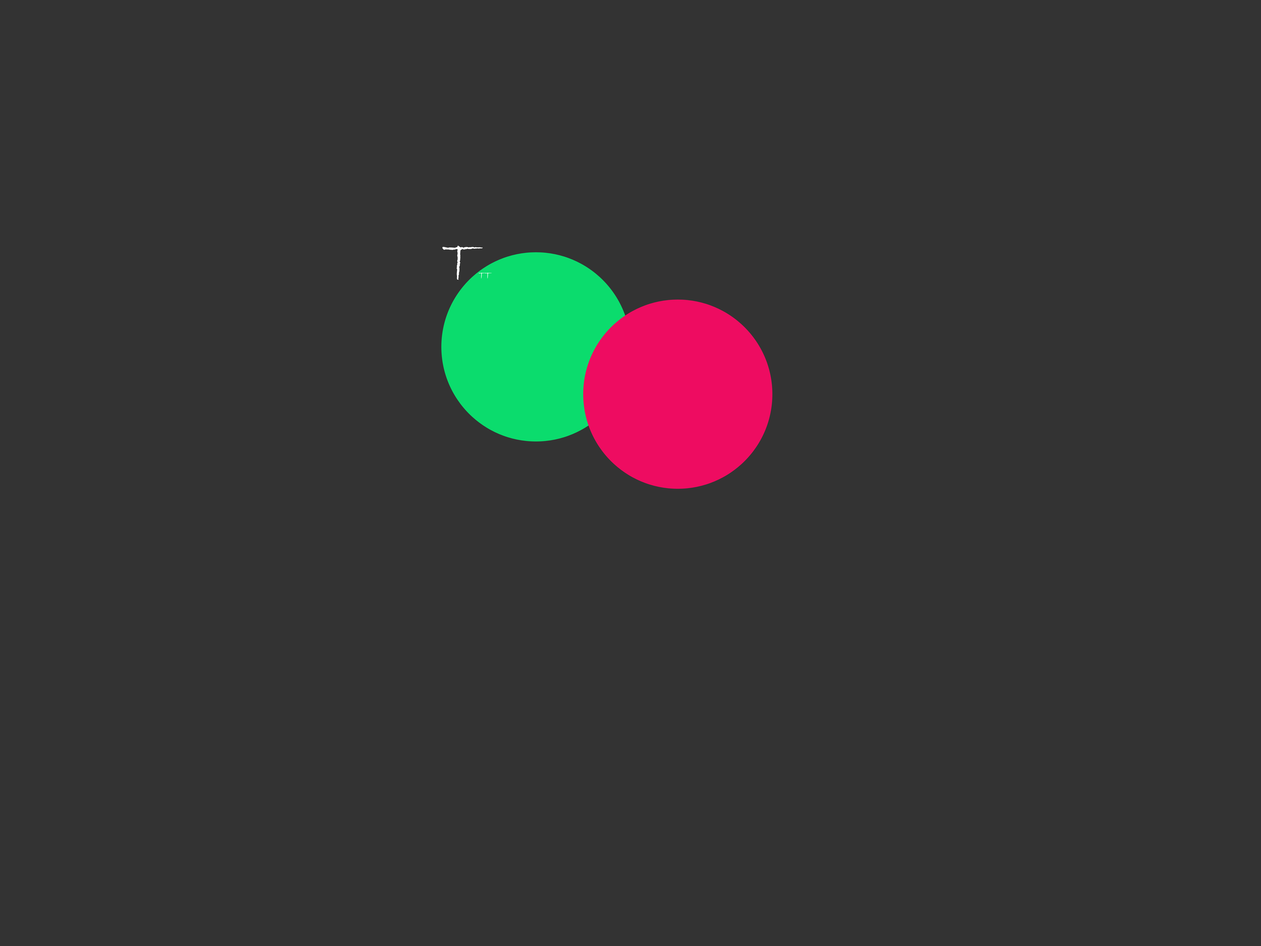
<style>
.page{position:relative;width:1261px;height:946px;background:#333333}
.page>*{position:absolute;margin:0}
.t1{font:10.5px "BradleyHandITC";color:#ffffff}
.t2{font:63px "BradleyHandITC";color:#ffffff}
</style>
<div class="page">
<p class="t1" style="left:442px;top:245px;width:50px;height:35px"><span class="t2">T</span>TT</p>
</div>
